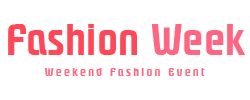
<style>
.page{position:relative;width:250px;height:100px;background:#ffffff}
.page>*{position:absolute;margin:0}
.t1{font:41.6px "PhrasticMedium";color:#ff4757}
.t2{font:41.6px "PhrasticMedium";color:#ff6681}
.t3{font:11.5px "PhrasticMedium";letter-spacing:0.2em;color:#ff6681}
</style>
<div class="page">
<p class="t1" style="left:8px;top:24px;width:237px;height:31px">Fashion <span class="t2">Week</span></p>
<p class="t3" style="left:44px;top:68px;width:161px;height:8px">Weekend Fashion Event</p>
</div>
